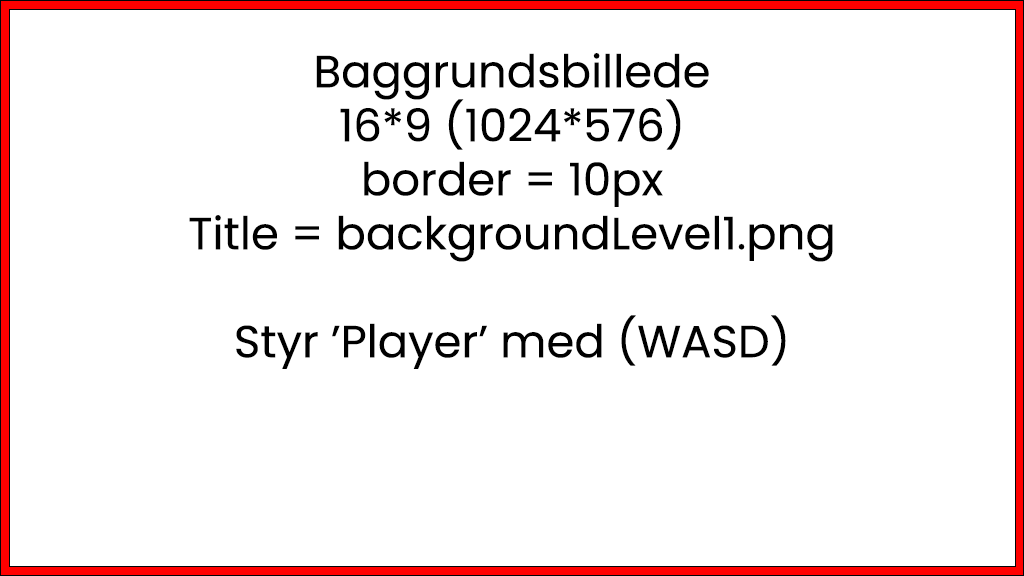
<style>
.page{position:relative;width:1024px;height:576px;background:#ffffff}
.page>*{position:absolute;margin:0}
.t1{font:45px "Poppins-Regular";color:#000000}
</style>
<div class="page">
<p class="t1" style="left:189px;top:53px;width:644px;height:316px;text-align:center">Baggrundsbillede<br>16*9 (1024*576)<br>border = 10px<br>Title = backgroundLevel1.png<br><br>Styr ’Player’ med (WASD)</p>
</div>
